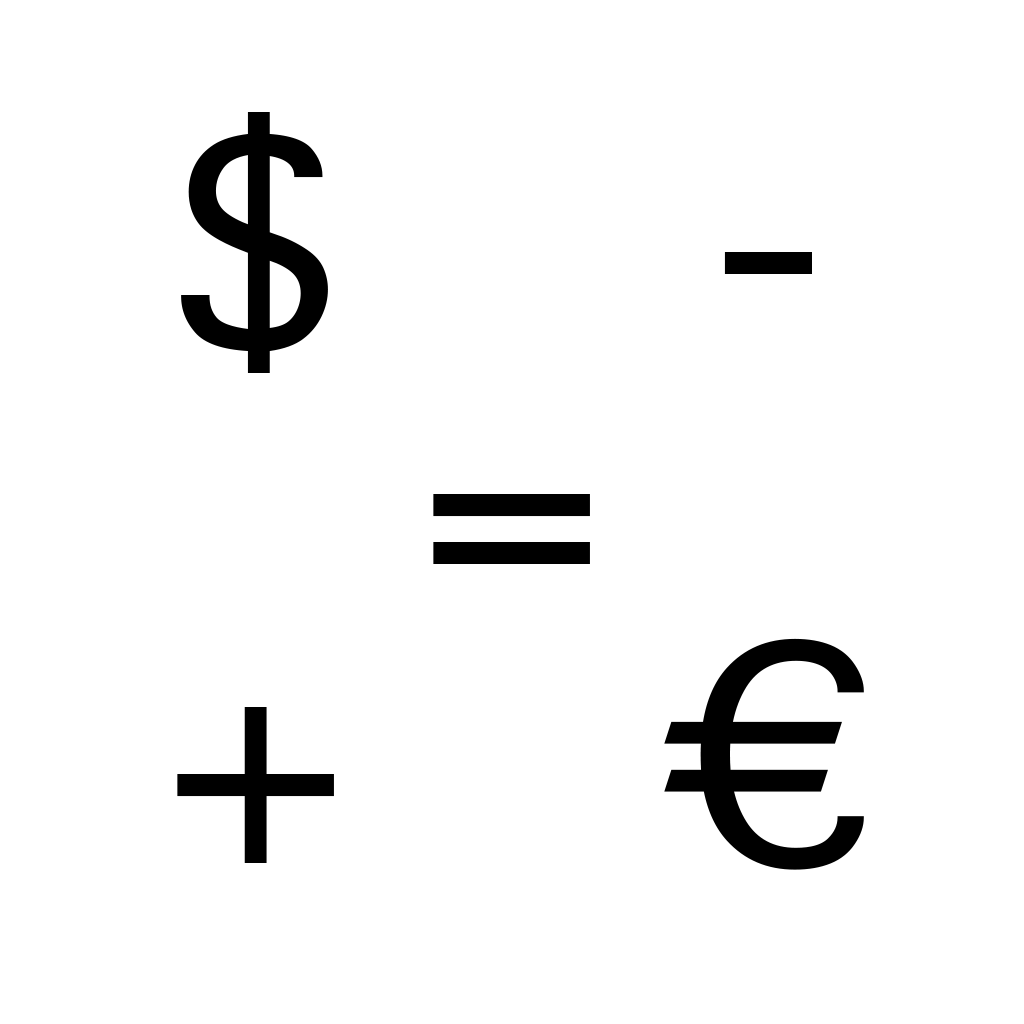
<style>
.page{position:relative;width:1024px;height:1024px;background:#ffffff}
.page>*{position:absolute;margin:0}
.t1{font:287px "Geneva";letter-spacing:0.5em;color:#000000;text-transform:uppercase}
</style>
<div class="page">
<p class="t1" style="left:181px;top:112px;width:147px;height:261px">$</p>
<p class="t1" style="left:724px;top:252px;width:88px;height:22px">-</p>
<p class="t1" style="left:433px;top:494px;width:157px;height:70px">=</p>
<p class="t1" style="left:664px;top:638px;width:200px;height:232px">€</p>
<p class="t1" style="left:177px;top:707px;width:157px;height:156px">+</p>
</div>
